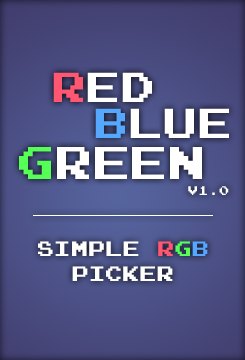
<style>
.page{position:relative;width:245px;height:360px}
.page>*{position:absolute;margin:0}
.t1{font:41.7px "JoystixMonospace-Regular";color:#ffffff}
.t2{font:41.7px "JoystixMonospace-Regular";color:#ff5672}
.t3{font:41.7px "JoystixMonospace-Regular";color:#56a8ff}
.t4{font:45.8px "JoystixMonospace-Regular";color:#ffffff}
.t5{font:45.8px "JoystixMonospace-Regular";color:#56ff56}
.t6{font:12.5px "JoystixMonospace-Regular";color:#ffffff}
.t7{font:20.8px "JoystixMonospace-Regular";color:#ffffff}
.t8{font:20.8px "JoystixMonospace-Regular";color:#ff5672}
.t9{font:20.8px "JoystixMonospace-Regular";color:#56ff56}
.t10{font:20.8px "JoystixMonospace-Regular";color:#56a8ff}
</style>
<div class="page">
<p class="t1" style="left:53px;top:72px;width:99px;height:30px"><span class="t2">R</span>ed</p>
<p class="t1" style="left:95px;top:108px;width:134px;height:30px"><span class="t3">b</span>lue</p>
<p class="t4" style="left:19px;top:147px;width:183px;height:32px"><span class="t5">g</span>reen</p>
<p class="t6" style="left:188px;top:186px;width:41px;height:9px">v1.0</p>
<p class="t7" style="left:38px;top:241px;width:170px;height:40px;text-align:center">Simple <span class="t8">R</span><span class="t9">G</span><span class="t10">B</span> picker</p>
</div>
